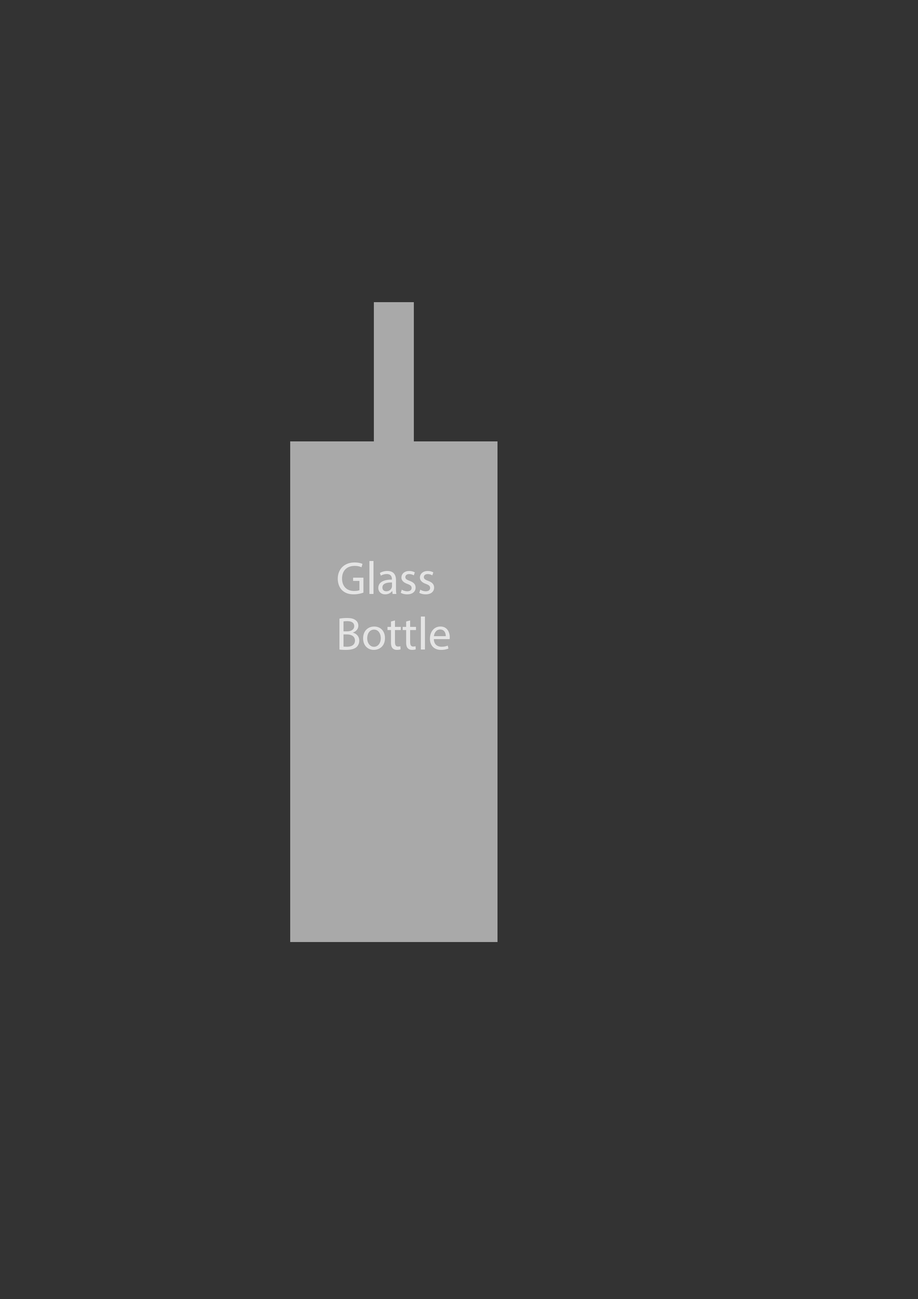
<style>
.page{position:relative;width:918px;height:1299px;background:#333333}
.page>*{position:absolute;margin:0}
.t1{font:46.3px "MyriadPro-Regular";color:#e4e4e4}
</style>
<div class="page">
<p class="t1" style="left:338px;top:561px;width:112px;height:89px">Glass<br>Bottle</p>
</div>
